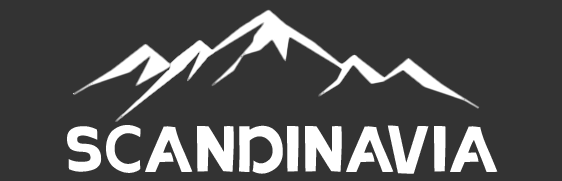
<style>
.page{position:relative;width:562px;height:181px;background:#333333}
.page>*{position:absolute;margin:0}
.t1{font:72px "Chailce-Noggin-Regular";color:#ffffff}
</style>
<div class="page">
<p class="t1" style="left:67px;top:125px;width:431px;height:49px">scandinavia</p>
</div>
